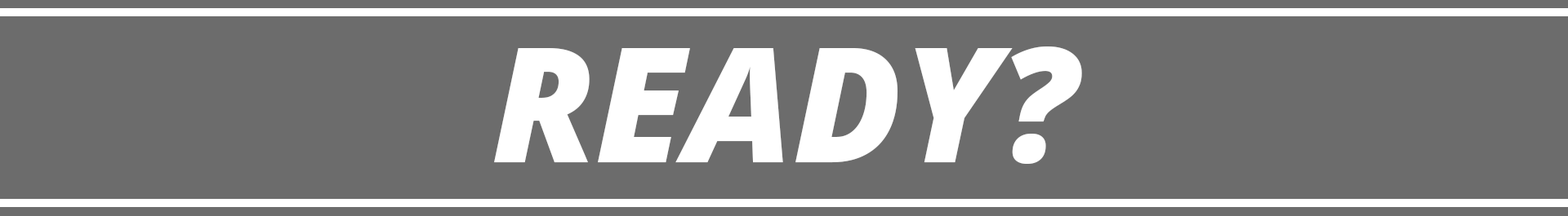
<style>
.page{position:relative;width:1568px;height:216px;background:#6c6c6c}
.page>*{position:absolute;margin:0}
.t1{font:159.9px "OpenSans-ExtraboldItalic";color:#ffffff}
</style>
<div class="page">
<p class="t1" style="left:494px;top:47px;width:588px;height:117px">READY?</p>
</div>
